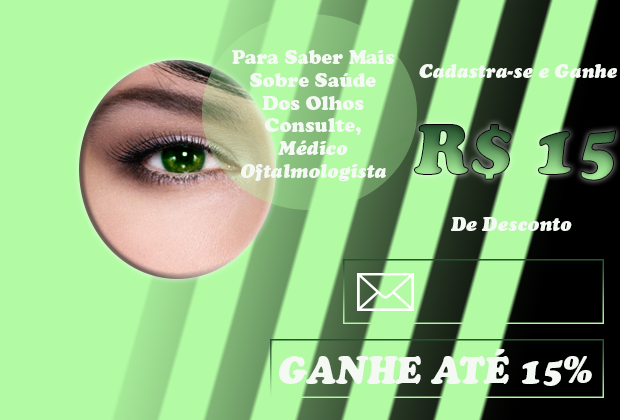
<style>
.page{position:relative;width:620px;height:420px}
.page>*{position:absolute;margin:0}
.t1{font:19px "CooperBlackStd";color:#f4faf3}
.t2{font:19px "CooperBlackStd-Italic";color:#f4faf3}
.t3{font:37px "CooperBlackStd-Italic";color:#f4faf3}
</style>
<div class="page">
<p class="t1" style="left:232px;top:50px;width:163px;height:132px;text-align:center">Para Saber Mais<br>Sobre Saúde<br>Dos Olhos<br>Consulte,<br><span class="t2">Médico<br>Oftalmologista</span></p>
<p class="t2" style="left:419px;top:64px;width:198px;height:14px">Cadastra-se e Ganhe</p>
<p class="t2" style="left:451px;top:217px;width:121px;height:14px">De Desconto</p>
<p class="t3" style="left:279px;top:349px;width:313px;height:37px">GANHE ATÉ 15% OFF</p>
</div>
